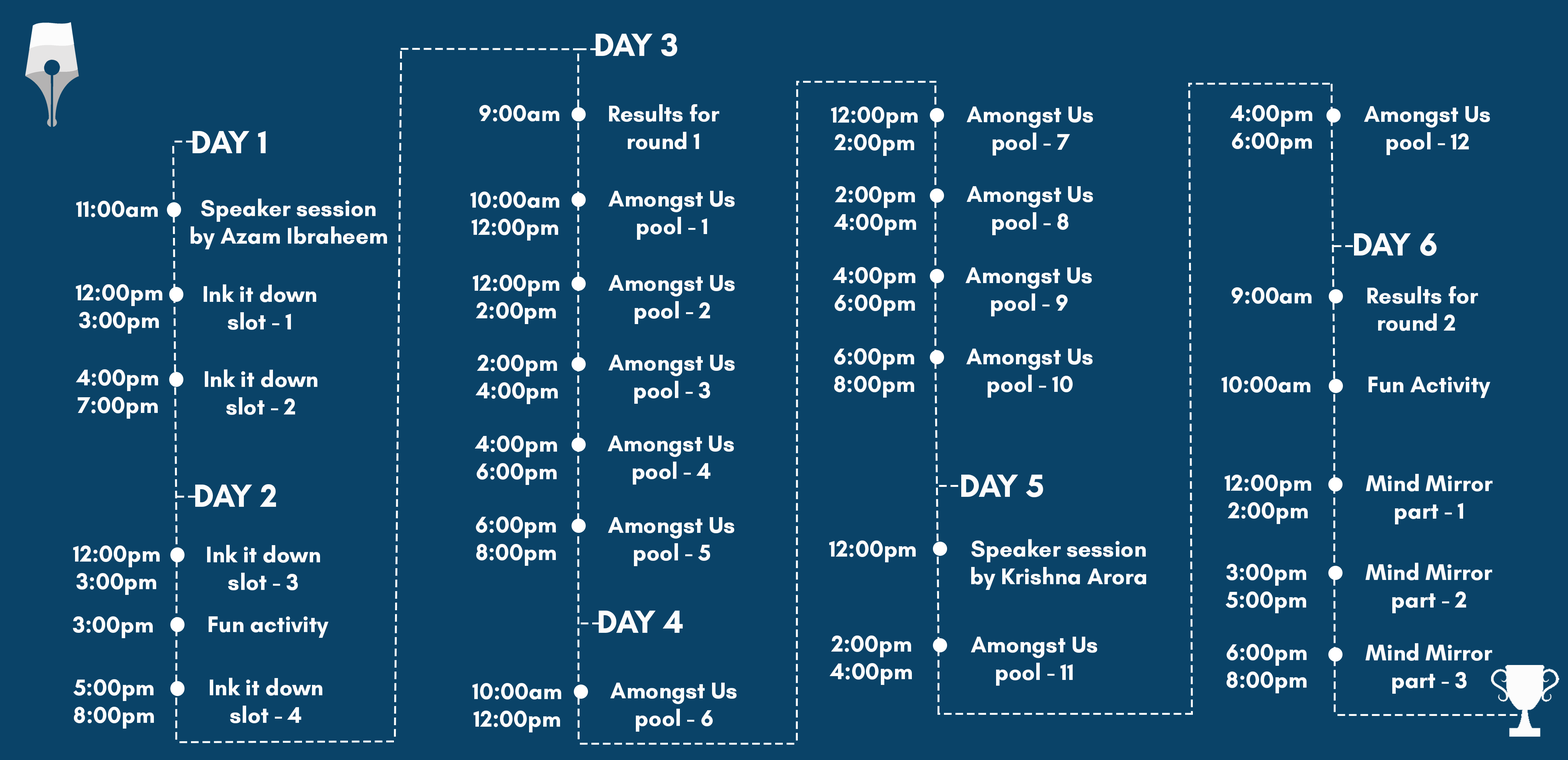
<style>
.page{position:relative;width:1568px;height:760px;background:#0a4368}
.page>*{position:absolute;margin:0}
.t1{font:32.7px "GlacialIndifference-Bold";color:#fcfcfc}
.t2{font:23px "GlacialIndifference-Bold";color:#fcfcfc}
.t3{font:22.9px "GlacialIndifference-Bold";color:#fcfcfc}
</style>
<div class="page">
<p class="t1" style="left:596px;top:33px;width:81px;height:23px">DAY 3</p>
<p class="t2" style="left:479px;top:105px;width:80px;height:16px">9:00am</p>
<p class="t2" style="left:609px;top:104px;width:110px;height:45px;text-align:center">Results for<br>round 1</p>
<p class="t2" style="left:831px;top:106px;width:87px;height:50px;text-align:center">12:00pm<br>2:00pm</p>
<p class="t2" style="left:967px;top:106px;width:126px;height:49px;text-align:center">Amongst Us<br>pool - 7</p>
<p class="t2" style="left:1230px;top:105px;width:82px;height:49px;text-align:center">4:00pm<br>6:00pm</p>
<p class="t2" style="left:1364px;top:106px;width:126px;height:49px;text-align:center">Amongst Us<br>pool - 12</p>
<p class="t1" style="left:193px;top:131px;width:73px;height:22px">DAY 1</p>
<p class="t2" style="left:470px;top:191px;width:89px;height:49px;text-align:center">10:00am<br>12:00pm</p>
<p class="t2" style="left:608px;top:191px;width:127px;height:49px;text-align:center">Amongst Us<br>pool - 1</p>
<p class="t2" style="left:834px;top:186px;width:82px;height:49px;text-align:center">2:00pm<br>4:00pm</p>
<p class="t2" style="left:967px;top:186px;width:126px;height:49px;text-align:center">Amongst Us<br>pool - 8</p>
<p class="t2" style="left:76px;top:201px;width:82px;height:16px">11:00am</p>
<p class="t3" style="left:191px;top:198px;width:196px;height:51px;text-align:center">Speaker session<br>by Azam Ibraheem</p>
<p class="t1" style="left:1354px;top:233px;width:83px;height:23px">DAY 6</p>
<p class="t2" style="left:833px;top:267px;width:82px;height:49px;text-align:center">4:00pm<br>6:00pm</p>
<p class="t2" style="left:965px;top:267px;width:127px;height:49px;text-align:center">Amongst Us<br>pool - 9</p>
<p class="t2" style="left:473px;top:274px;width:86px;height:50px;text-align:center">12:00pm<br>2:00pm</p>
<p class="t2" style="left:608px;top:275px;width:127px;height:49px;text-align:center">Amongst Us<br>pool - 2</p>
<p class="t2" style="left:76px;top:284px;width:86px;height:49px;text-align:center">12:00pm<br>3:00pm</p>
<p class="t2" style="left:204px;top:284px;width:112px;height:46px;text-align:center">Ink it down<br>slot - 1</p>
<p class="t2" style="left:1232px;top:287px;width:80px;height:17px">9:00am</p>
<p class="t2" style="left:1367px;top:286px;width:111px;height:45px;text-align:center">Results for<br>round 2</p>
<p class="t2" style="left:834px;top:348px;width:80px;height:49px;text-align:center">6:00pm<br>8:00pm</p>
<p class="t2" style="left:966px;top:348px;width:127px;height:49px;text-align:center">Amongst Us<br>pool - 10</p>
<p class="t2" style="left:475px;top:354px;width:83px;height:50px;text-align:center">2:00pm<br>4:00pm</p>
<p class="t2" style="left:608px;top:354px;width:127px;height:49px;text-align:center">Amongst Us<br>pool - 3</p>
<p class="t2" style="left:76px;top:369px;width:82px;height:49px;text-align:center">4:00pm<br>7:00pm</p>
<p class="t2" style="left:205px;top:369px;width:112px;height:46px;text-align:center">Ink it down<br>slot - 2</p>
<p class="t2" style="left:1222px;top:376px;width:88px;height:16px">10:00am</p>
<p class="t2" style="left:1369px;top:376px;width:121px;height:22px">Fun Activity</p>
<p class="t2" style="left:475px;top:435px;width:82px;height:50px;text-align:center">4:00pm<br>6:00pm</p>
<p class="t2" style="left:608px;top:435px;width:126px;height:49px;text-align:center">Amongst Us<br>pool - 4</p>
<p class="t2" style="left:1366px;top:474px;width:127px;height:50px;text-align:center">Mind Mirror<br>part - 1</p>
<p class="t1" style="left:195px;top:484px;width:81px;height:22px">DAY 2</p>
<p class="t1" style="left:961px;top:474px;width:82px;height:23px">DAY 5</p>
<p class="t2" style="left:1225px;top:474px;width:86px;height:50px;text-align:center">12:00pm<br>2:00pm</p>
<p class="t2" style="left:476px;top:516px;width:80px;height:49px;text-align:center">6:00pm<br>8:00pm</p>
<p class="t2" style="left:608px;top:517px;width:126px;height:49px;text-align:center">Amongst Us<br>pool - 5</p>
<p class="t2" style="left:73px;top:545px;width:87px;height:50px;text-align:center">12:00pm<br>3:00pm</p>
<p class="t2" style="left:207px;top:544px;width:113px;height:46px;text-align:center">Ink it down<br>slot - 3</p>
<p class="t2" style="left:829px;top:540px;width:87px;height:22px">12:00pm</p>
<p class="t2" style="left:971px;top:539px;width:175px;height:51px;text-align:center">Speaker session<br>by Krishna Arora</p>
<p class="t2" style="left:1225px;top:564px;width:81px;height:49px;text-align:center">3:00pm<br>5:00pm</p>
<p class="t2" style="left:1365px;top:562px;width:127px;height:51px;text-align:center">Mind Mirror<br>part - 2</p>
<p class="t2" style="left:73px;top:616px;width:80px;height:22px">3:00pm</p>
<p class="t2" style="left:209px;top:616px;width:119px;height:21px">Fun activity</p>
<p class="t1" style="left:599px;top:610px;width:84px;height:22px">DAY 4</p>
<p class="t2" style="left:830px;top:635px;width:82px;height:49px;text-align:center">2:00pm<br>4:00pm</p>
<p class="t2" style="left:971px;top:636px;width:126px;height:49px;text-align:center">Amongst Us<br>pool - 11</p>
<p class="t2" style="left:1227px;top:644px;width:80px;height:49px;text-align:center">6:00pm<br>8:00pm</p>
<p class="t2" style="left:1365px;top:643px;width:127px;height:50px;text-align:center">Mind Mirror<br>part - 3</p>
<p class="t2" style="left:210px;top:677px;width:112px;height:46px;text-align:center">Ink it down<br>slot - 4</p>
<p class="t2" style="left:73px;top:679px;width:81px;height:49px;text-align:center">5:00pm<br>8:00pm</p>
<p class="t2" style="left:472px;top:683px;width:89px;height:49px;text-align:center">10:00am<br>12:00pm</p>
<p class="t2" style="left:610px;top:682px;width:127px;height:49px;text-align:center">Amongst Us<br>pool - 6</p>
</div>
